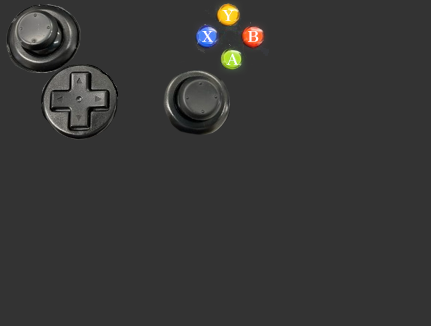
<style>
.page{position:relative;width:431px;height:326px;background:#333333}
.page>*{position:absolute;margin:0}
.t1{font:14.7px "ZenAntiqueSoft-Regular";color:#ffffff;scale:1.08 1}
</style>
<div class="page">
<p class="t1" style="left:222px;top:10px;width:12px;height:11px">Y</p>
<p class="t1" style="left:202px;top:31px;width:11px;height:11px">X</p>
<p class="t1" style="left:248px;top:31px;width:11px;height:11px">B</p>
<p class="t1" style="left:226px;top:53px;width:13px;height:12px">A</p>
</div>
